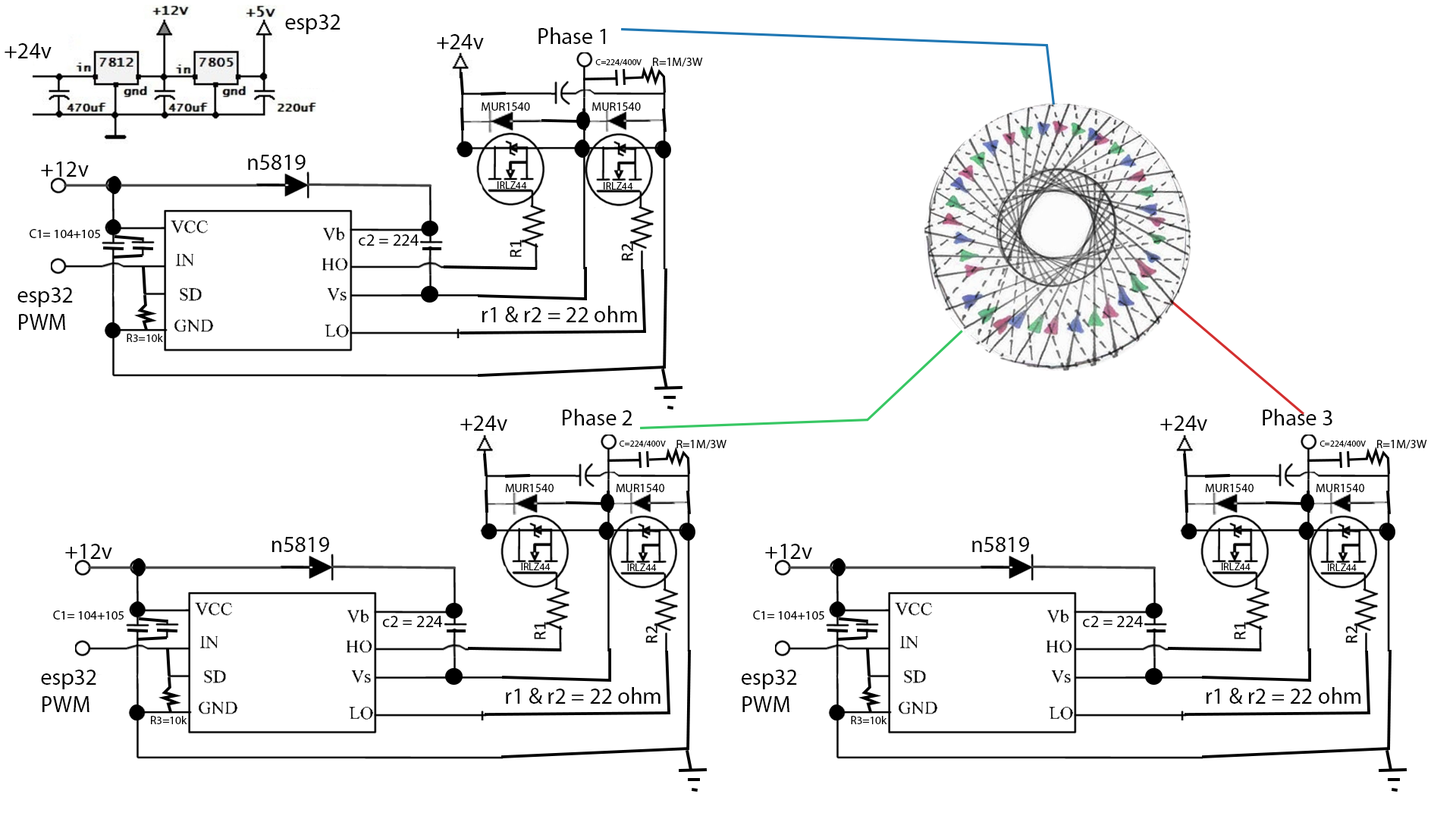
<style>
.page{position:relative;width:1456px;height:819px;background:#ffffff}
.page>*{position:absolute;margin:0}
.t1{font:22.7px "MyriadPro-Regular";color:#000000}
.t2{font:8.9px "MyriadPro-Regular";color:#000000}
.t3{font:12.1px "MyriadPro-Regular";color:#000000}
.t4{font:10.5px "MyriadPro-Regular";color:#000000}
.t5{font:12.9px "MyriadPro-Regular";color:#000000}
.t6{font:17.2px "MyriadPro-Regular";color:#000000}
.t7{font:11.6px "MyriadPro-Regular";color:#000000}
</style>
<div class="page">
<p class="t1" style="left:285px;top:14px;width:55px;height:20px">esp32</p>
<p class="t1" style="left:538px;top:27px;width:67px;height:17px">Phase 1</p>
<p class="t1" style="left:437px;top:34px;width:47px;height:15px">+24v</p>
<p class="t1" style="left:5px;top:43px;width:47px;height:15px">+24v</p>
<p class="t2" style="left:595px;top:59px;width:47px;height:7px">C=224/400V</p>
<p class="t3" style="left:653px;top:58px;width:50px;height:9px">R=1M/3W</p>
<p class="t3" style="left:482px;top:102px;width:48px;height:9px">MUR1540</p>
<p class="t3" style="left:592px;top:102px;width:49px;height:9px">MUR1540</p>
<p class="t1" style="left:41px;top:162px;width:48px;height:15px">+12v</p>
<p class="t1" style="left:248px;top:155px;width:58px;height:15px">n5819</p>
<p class="t4" style="left:497px;top:181px;width:30px;height:8px">IRLZ44</p>
<p class="t4" style="left:604px;top:182px;width:29px;height:8px">IRLZ44</p>
<p class="t5" style="left:30px;top:229px;width:70px;height:9px">C1= 104+105</p>
<p class="t6" style="left:359px;top:234px;width:60px;height:12px">c2 = 224</p>
<p class="t1" style="left:17px;top:287px;width:56px;height:43px">esp32<br>PWM</p>
<p class="t1" style="left:482px;top:306px;width:155px;height:16px">r1 &amp; r2 = 22 ohm</p>
<p class="t7" style="left:127px;top:334px;width:36px;height:8px">R3=10k</p>
<p class="t1" style="left:563px;top:409px;width:69px;height:16px">Phase 2</p>
<p class="t1" style="left:1263px;top:409px;width:69px;height:16px">Phase 3</p>
<p class="t1" style="left:460px;top:416px;width:47px;height:15px">+24v</p>
<p class="t1" style="left:1160px;top:416px;width:47px;height:15px">+24v</p>
<p class="t2" style="left:620px;top:441px;width:46px;height:6px">C=224/400V</p>
<p class="t3" style="left:676px;top:440px;width:50px;height:9px">R=1M/3W</p>
<p class="t2" style="left:1319px;top:441px;width:47px;height:6px">C=224/400V</p>
<p class="t3" style="left:1377px;top:440px;width:50px;height:9px">R=1M/3W</p>
<p class="t3" style="left:505px;top:484px;width:49px;height:8px">MUR1540</p>
<p class="t3" style="left:616px;top:484px;width:48px;height:8px">MUR1540</p>
<p class="t3" style="left:1205px;top:484px;width:49px;height:8px">MUR1540</p>
<p class="t3" style="left:1316px;top:484px;width:48px;height:8px">MUR1540</p>
<p class="t1" style="left:65px;top:544px;width:47px;height:15px">+12v</p>
<p class="t1" style="left:272px;top:537px;width:57px;height:15px">n5819</p>
<p class="t1" style="left:765px;top:544px;width:47px;height:15px">+12v</p>
<p class="t1" style="left:972px;top:537px;width:57px;height:15px">n5819</p>
<p class="t4" style="left:521px;top:563px;width:30px;height:7px">IRLZ44</p>
<p class="t4" style="left:627px;top:563px;width:30px;height:8px">IRLZ44</p>
<p class="t4" style="left:1222px;top:563px;width:28px;height:7px">IRLZ44</p>
<p class="t4" style="left:1328px;top:563px;width:29px;height:8px">IRLZ44</p>
<p class="t5" style="left:53px;top:610px;width:71px;height:10px">C1= 104+105</p>
<p class="t6" style="left:382px;top:616px;width:61px;height:11px">c2 = 224</p>
<p class="t5" style="left:753px;top:610px;width:71px;height:10px">C1= 104+105</p>
<p class="t6" style="left:1083px;top:616px;width:60px;height:11px">c2 = 224</p>
<p class="t1" style="left:41px;top:670px;width:55px;height:42px">esp32<br>PWM</p>
<p class="t1" style="left:742px;top:670px;width:55px;height:42px">esp32<br>PWM</p>
<p class="t1" style="left:506px;top:687px;width:154px;height:17px">r1 &amp; r2 = 22 ohm</p>
<p class="t1" style="left:1206px;top:687px;width:154px;height:17px">r1 &amp; r2 = 22 ohm</p>
<p class="t7" style="left:151px;top:716px;width:36px;height:8px">R3=10k</p>
<p class="t7" style="left:851px;top:716px;width:36px;height:8px">R3=10k</p>
</div>
